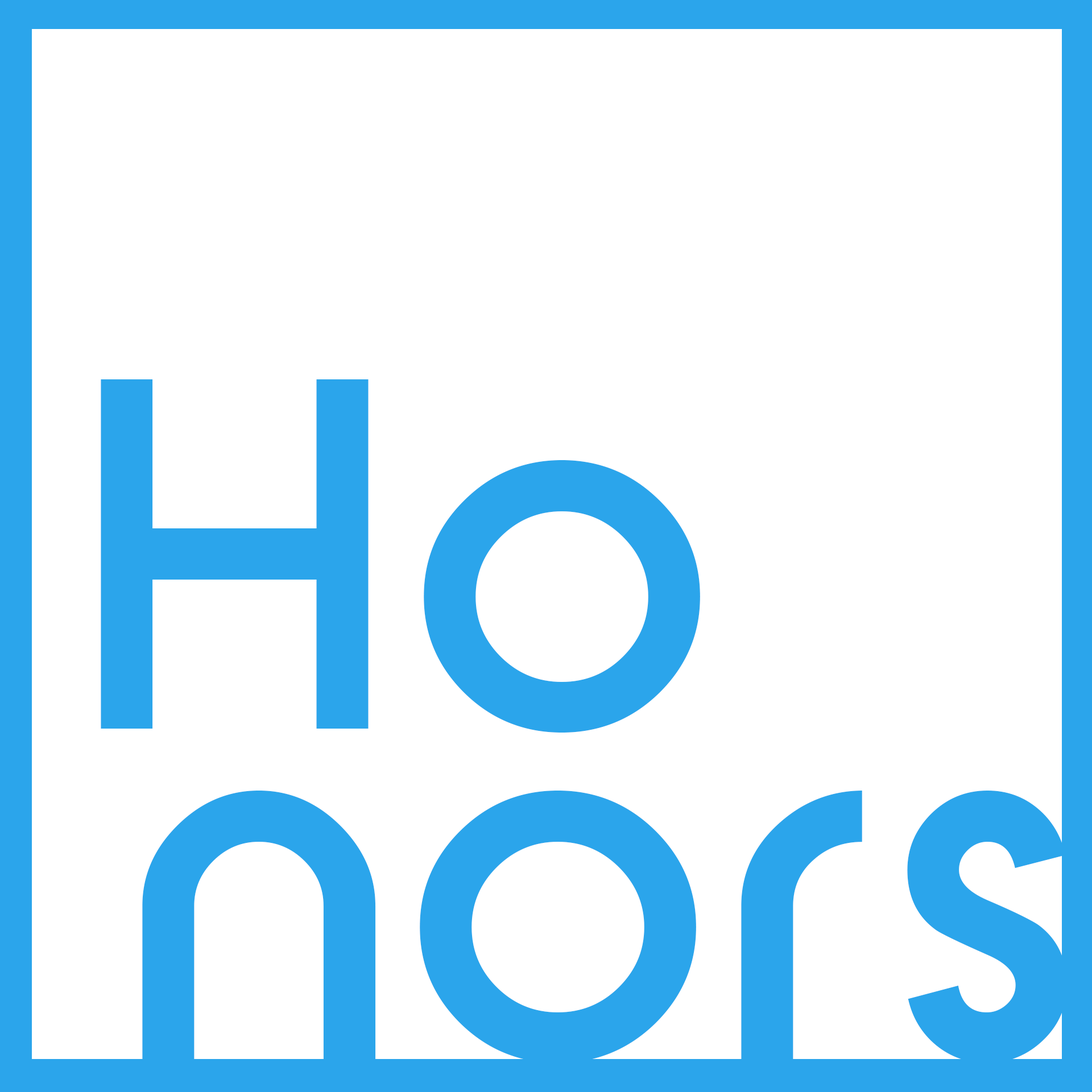
<style>
.page{position:relative;width:1092px;height:1092px;background:#ffffff}
.page>*{position:absolute;margin:0}
.t1{font:511.9px "SFNewRepublic-Bold";color:#2ba5eb}
</style>
<div class="page">
<p class="t1" style="left:101px;top:379px;width:599px;height:354px">Ho</p>
<p class="t1" style="left:142px;top:791px;width:925px;height:272px">nors</p>
</div>
